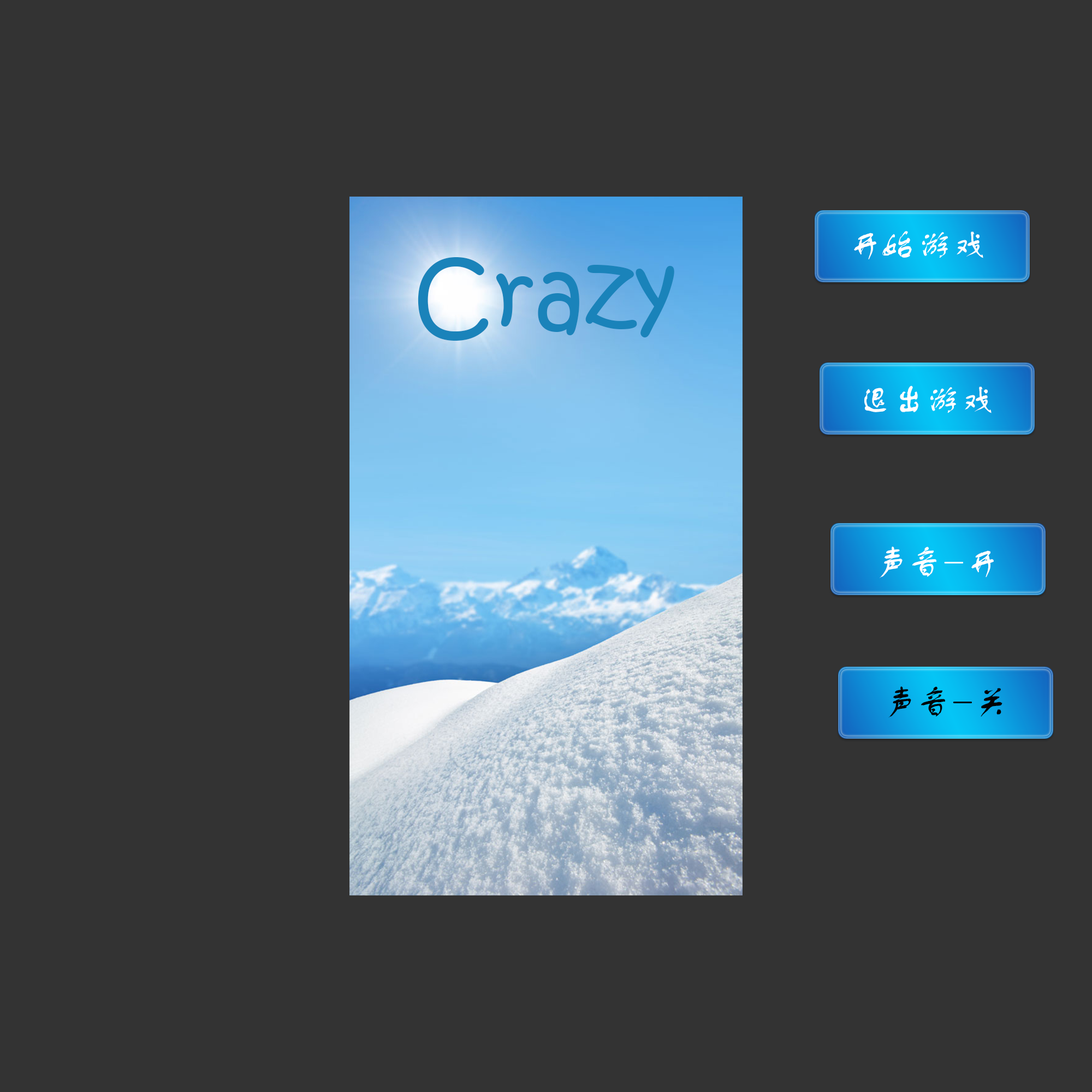
<style>
.page{position:relative;width:1092px;height:1092px;background:#333333}
.page>*{position:absolute;margin:0}
.t1{font:34.9px "FZSTK--GBK1-0";color:#ffffff}
.t2{font:93.9px "KristenITC-Regular";color:#1a83ba}
.t3{font:34.9px "FZSTK--GBK1-0";color:#020202}
</style>
<div class="page">
<p class="t1" style="left:854px;top:231px;width:129px;height:28px">开始游戏</p>
<p class="t2" style="left:418px;top:257px;width:256px;height:84px">Crazy</p>
<p class="t1" style="left:864px;top:385px;width:128px;height:28px">退出游戏</p>
<p class="t1" style="left:880px;top:547px;width:114px;height:31px">声音-开</p>
<p class="t3" style="left:888px;top:686px;width:114px;height:32px">声音-关</p>
</div>
